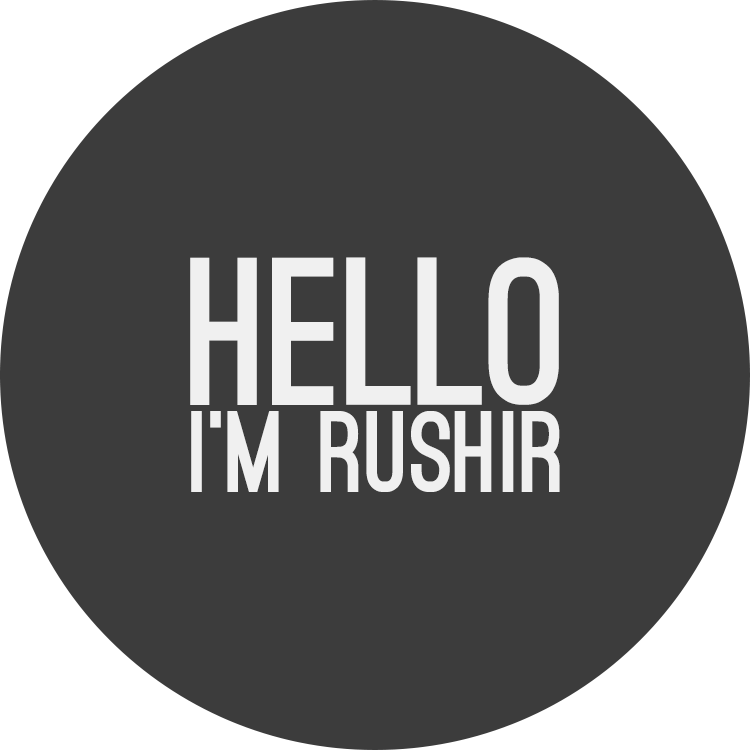
<style>
.page{position:relative;width:750px;height:750px;background:#3c3c3c}
.page>*{position:absolute;margin:0}
.t1{font:200px "OstrichSans-Black";color:#f0f0f0}
.t2{font:110px "OstrichSans-Black";color:#f0f0f0}
</style>
<div class="page">
<p class="t1" style="left:190px;top:257px;width:369px;height:148px">HELLO</p>
<p class="t2" style="left:191px;top:411px;width:369px;height:81px">I’M RUSHIR</p>
</div>
